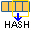
<style>
.page{position:relative;width:32px;height:32px;background:#ffffff}
.page>*{position:absolute;margin:0}
.t1{font:9px "ArialMT";color:#000000}
</style>
<div class="page">
<p class="t1" style="left:5px;top:21px;width:24px;height:7px">HASH</p>
</div>
